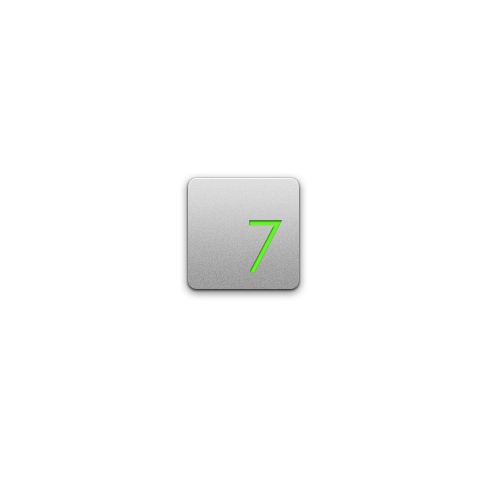
<style>
.page{position:relative;width:500px;height:500px;background:#ffffff}
.page>*{position:absolute;margin:0}
.t1{font:72px "CenturyGothic";color:#61f420}
</style>
<div class="page">
<p class="t1" style="left:249px;top:220px;width:33px;height:54px">7</p>
</div>
